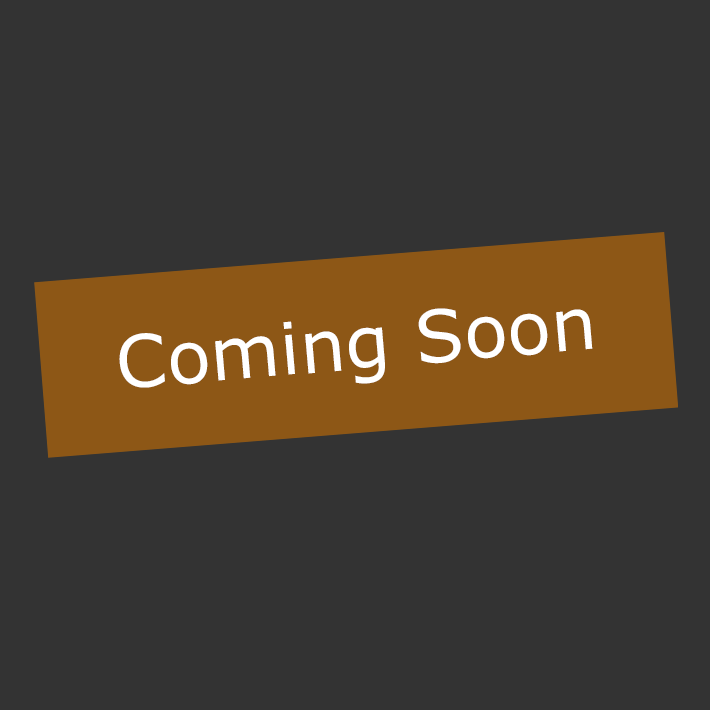
<style>
.page{position:relative;width:710px;height:710px;background:#333333}
.page>*{position:absolute;margin:0}
.t1{font:72px "MSReferenceSansSerif";color:#ffffff}
</style>
<div class="page">
<p class="t1" style="left:119px;top:308px;width:474px;height:80px;rotate:-5deg">Coming Soon</p>
</div>
